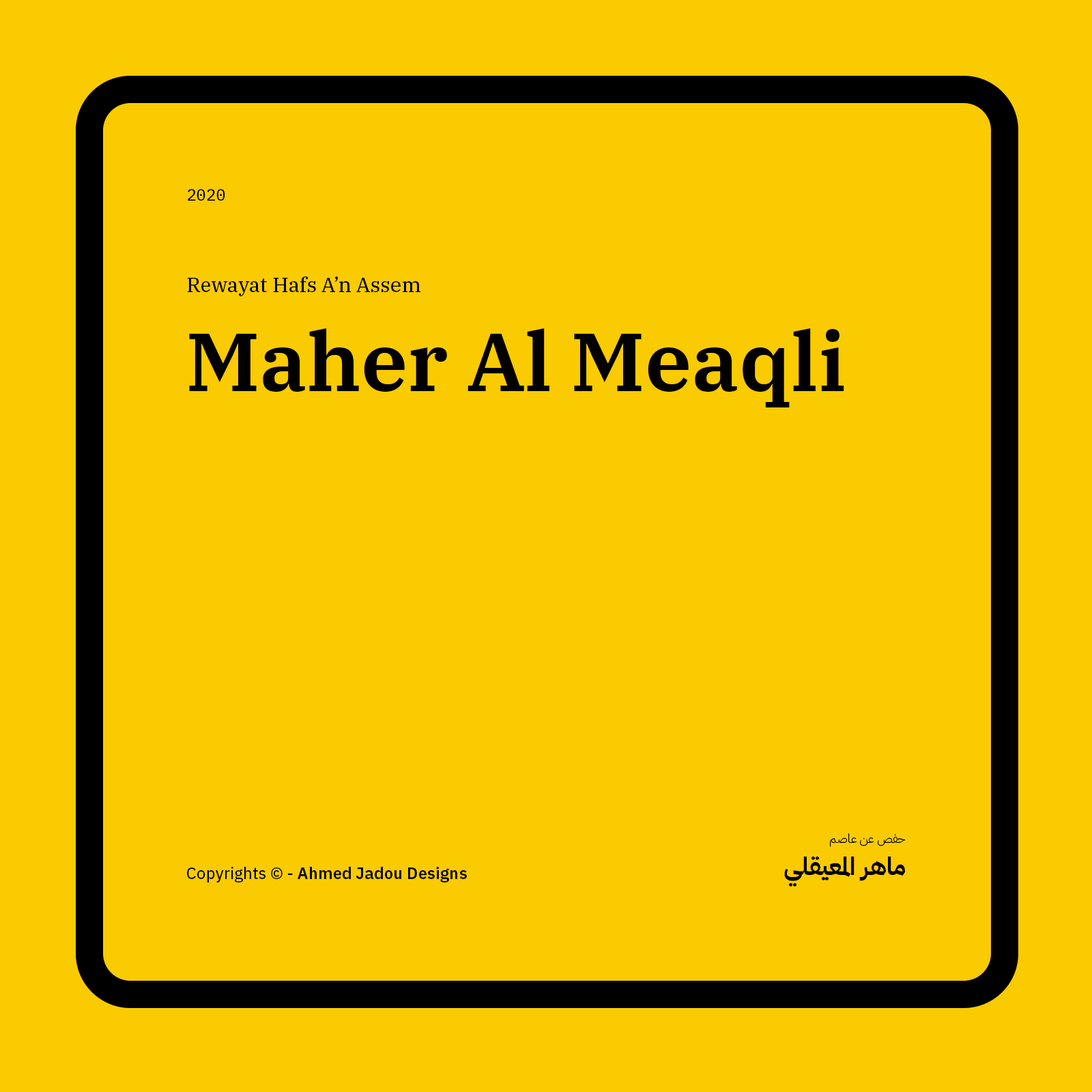
<style>
.page{position:relative;width:1092px;height:1092px;background:#facb00}
.page>*{position:absolute;margin:0}
.t1{font:16.4px "IBMPlexMono-Text";color:#000000}
.t2{font:20.5px "IBMPlexSerif-Text";color:#000000}
.t3{font:81.9px "IBMPlexSerif-SemiBold";color:#000000}
.t4{font:12.3px "IBMPlexArabic-Light";color:#000000}
.t5{font:24.6px "IBMPlexArabic-Bold";color:#000000}
.t6{font:16.4px "IBMPlexSans-SemiBold";color:#000000}
.t7{font:16.4px "IBMPlexSans-Text";color:#000000}
</style>
<div class="page">
<p class="t1" style="left:188px;top:189px;width:37px;height:12px">2020</p>
<p class="t2" style="left:187px;top:276px;width:233px;height:20px">Rewayat Hafs A’n Assem</p>
<p class="t3" style="left:189px;top:328px;width:655px;height:79px">Maher Al Meaqli</p>
<p class="t4" style="left:830px;top:833px;width:76px;height:14px">حفص عن عاصم</p>
<p class="t5" style="left:784px;top:857px;width:121px;height:30px">ماهر المعيقلي</p>
<p class="t6" style="left:187px;top:867px;width:280px;height:15px"><span class="t7">Copyrights © - </span>Ahmed Jadou Designs</p>
</div>
